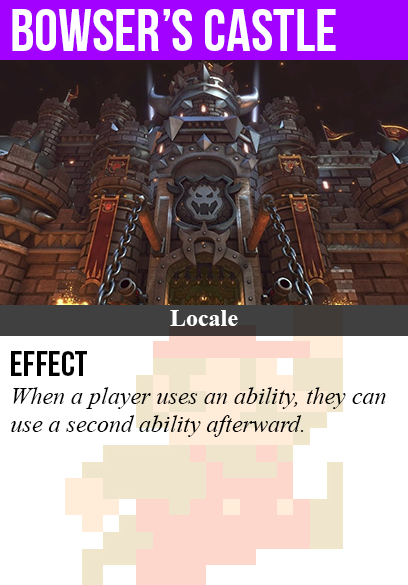
<style>
.page{position:relative;width:408px;height:585px;background:#ffffff}
.page>*{position:absolute;margin:0}
.t1{font:60px "BebasNeue";color:#ffffff}
.t2{font:24px "TimesNewRomanPS-BoldMT";color:#ffffff}
.t3{font:36px "BebasNeue";color:#000000}
.t4{font:24px "TimesNewRomanPS-ItalicMT";color:#000000}
</style>
<div class="page">
<p class="t1" style="left:12px;top:9px;width:324px;height:42px">bowser’s castle</p>
<p class="t2" style="left:170px;top:310px;width:68px;height:16px">Locale</p>
<p class="t3" style="left:11px;top:351px;width:76px;height:25px">Effect</p>
<p class="t4" style="left:11px;top:387px;width:375px;height:50px">When a player uses an ability, they can<br>use a second ability afterward.</p>
</div>
